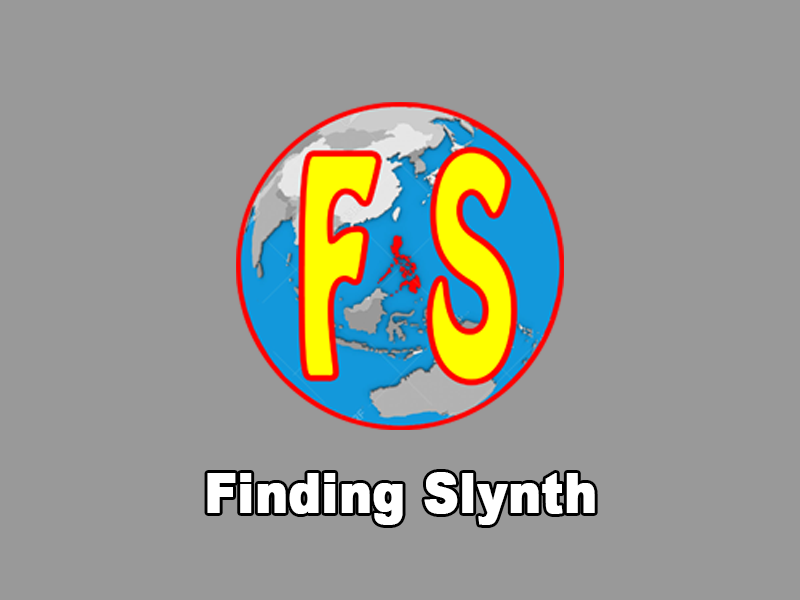
<style>
.page{position:relative;width:800px;height:600px;background:#999999}
.page>*{position:absolute;margin:0}
.t1{font:54.1px "Arial-Black";color:#ffffff;font-weight:bold;scale:0.89 1}
</style>
<div class="page">
<p class="t1" style="left:207px;top:472px;width:388px;height:53px">Finding Slynth</p>
</div>
